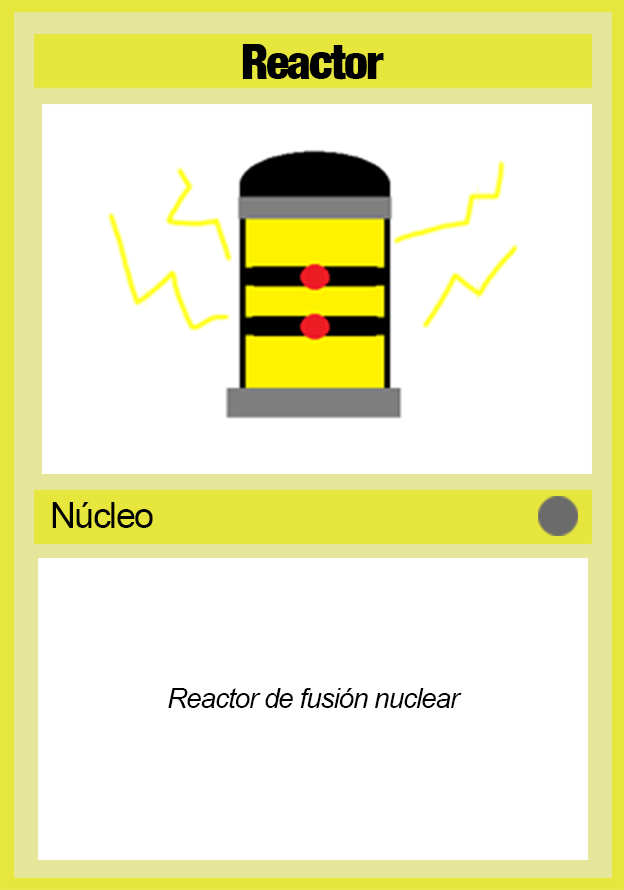
<style>
.page{position:relative;width:624px;height:890px;background:#ffffff}
.page>*{position:absolute;margin:0}
.t1{font:48px "Harvest";letter-spacing:-0.04em;color:#000000}
.t2{font:36px "ArialMT";letter-spacing:-0.04em;color:#000000}
.t3{font:28px "Arial-ItalicMT";letter-spacing:-0.04em;color:#000000}
</style>
<div class="page">
<p class="t1" style="left:242px;top:44px;width:142px;height:36px">Reactor</p>
<p class="t2" style="left:52px;top:502px;width:101px;height:26px">Núcleo</p>
<p class="t3" style="left:168px;top:688px;width:294px;height:20px">Reactor de fusión nuclear</p>
</div>
